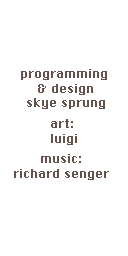
<style>
.page{position:relative;width:128px;height:256px;background:#ffffff}
.page>*{position:absolute;margin:0}
.t1{font:12.1px "ChicagoFLF";color:#65524d}
</style>
<div class="page">
<p class="t1" style="left:21px;top:69px;width:86px;height:40px;text-align:center">programming <br>&amp; design<br>skye sprung</p>
<p class="t1" style="left:51px;top:119px;width:26px;height:26px;text-align:center">art: <br>luigi</p>
<p class="t1" style="left:14px;top:154px;width:95px;height:26px;text-align:center">music:<br>richard senger</p>
</div>
